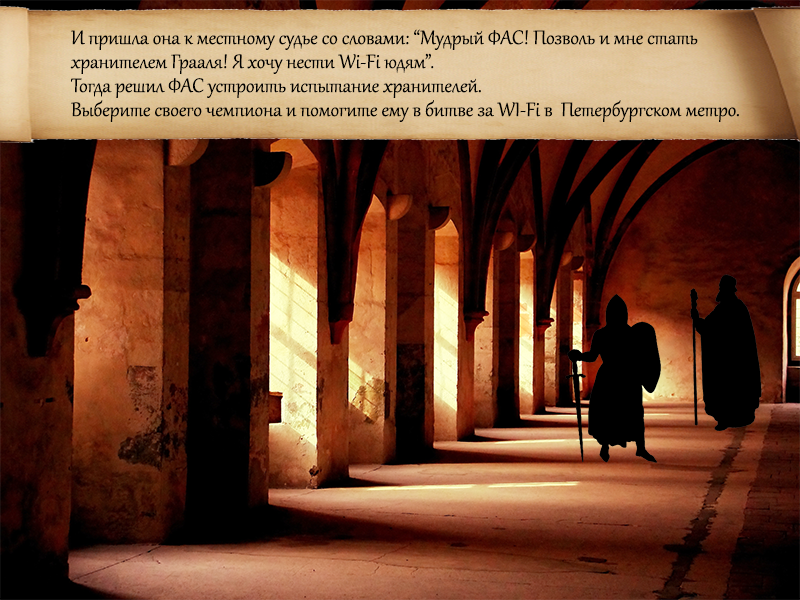
<style>
.page{position:relative;width:800px;height:600px}
.page>*{position:absolute;margin:0}
.t1{font:24px/24px "Gabriola";color:#000000}
</style>
<div class="page">
<p class="t1" style="left:70px;top:29px;width:669px;height:93px">И пришла она к местному судье со словами: “Мудрый ФАС! Позволь и мне стать <br>хранителем Грааля! Я хочу нести Wi-Fi юдям”.<br>Тогда решил ФАС устроить испытание хранителей. <br>Выберите своего чемпиона и помогите ему в битве за WI-Fi в  Петербургском метро.</p>
</div>
